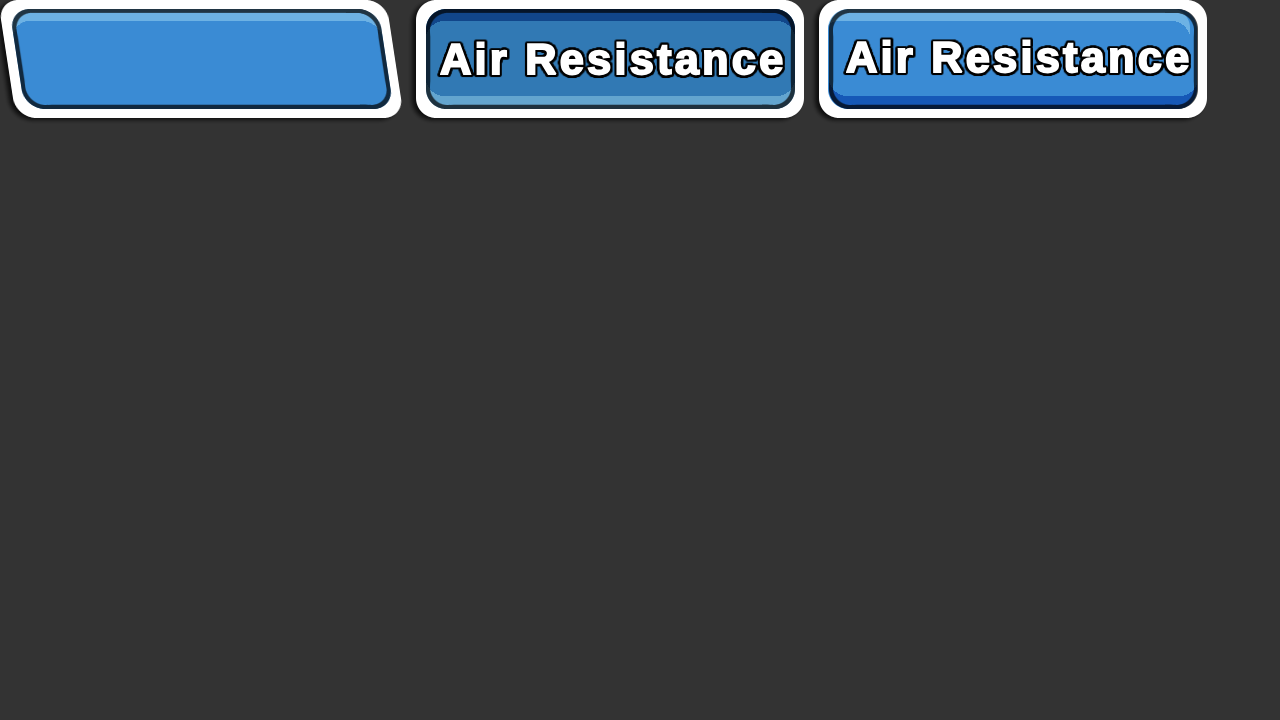
<style>
.page{position:relative;width:1280px;height:720px;background:#333333}
.page>*{position:absolute;margin:0}
.t1{font:43.3px "LiberationSans-Bold";letter-spacing:0.075em;color:#ffffff}
</style>
<div class="page">
<p class="t1" style="left:440px;top:41px;width:343px;height:35px">Air Resistance</p>
<p class="t1" style="left:846px;top:39px;width:343px;height:35px">Air Resistance</p>
</div>
